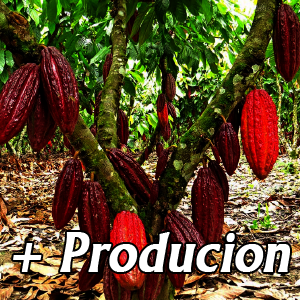
<style>
.page{position:relative;width:300px;height:300px}
.page>*{position:absolute;margin:0}
.t1{font:55.6px "Narkisim";color:#ffffff;font-weight:bold;font-style:italic}
</style>
<div class="page">
<p class="t1" style="left:13px;top:232px;width:277px;height:40px">+ Producion</p>
</div>
